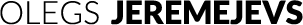
<style>
.page{position:relative;width:303px;height:25px;background:#ffffff}
.page>*{position:absolute;margin:0}
.t1{font:32px "Lato-Light";color:#000000}
.t2{font:32px "Lato-Black";color:#000000}
</style>
<div class="page">
<p class="t1" style="left:0px;top:1px;width:99px;height:24px">OLEGS</p>
<p class="t2" style="left:111px;top:0px;width:192px;height:25px">JEREMEJEVS</p>
</div>
